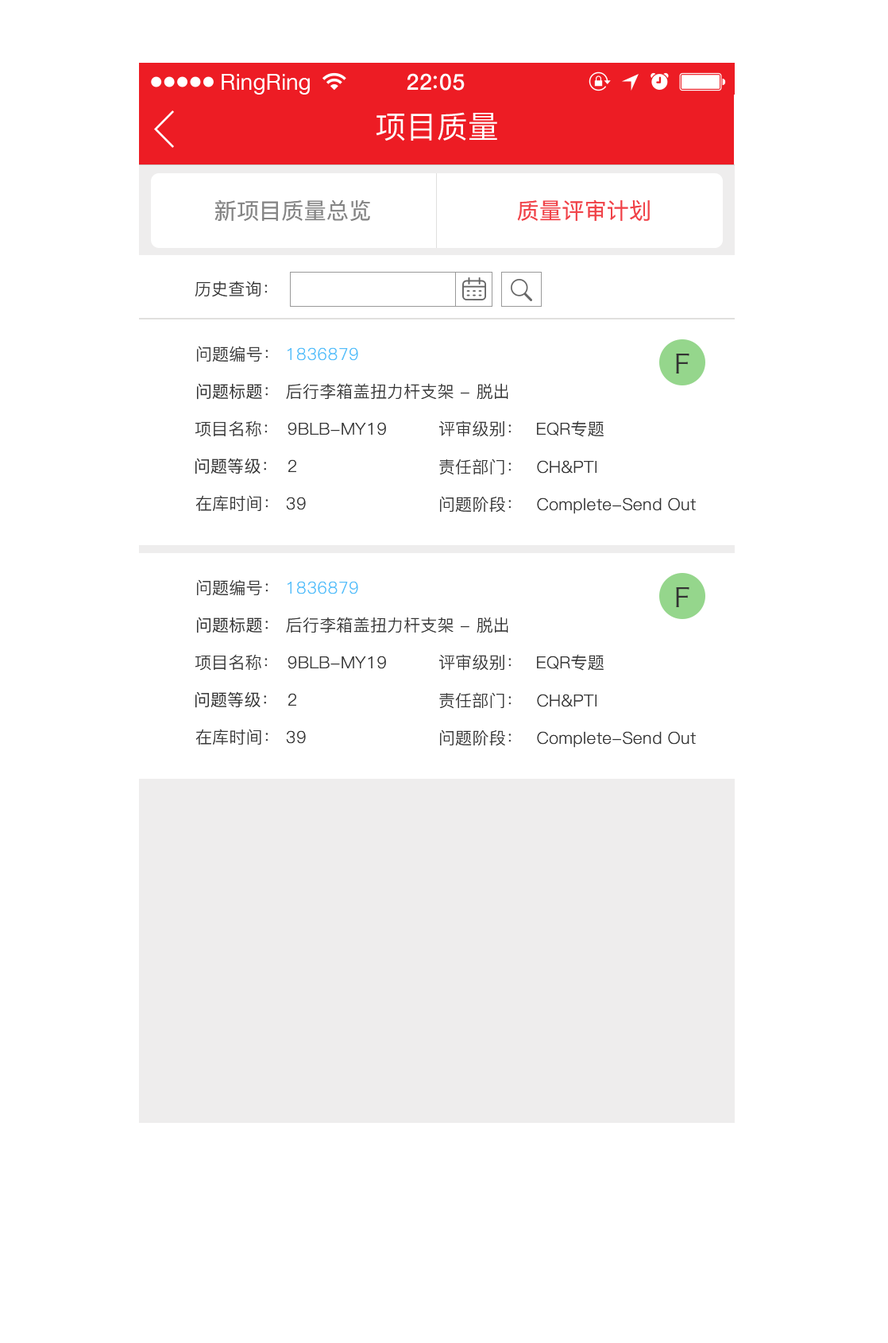
<style>
.page{position:relative;width:888px;height:1343px;background:#ffffff}
.page>*{position:absolute;margin:0}
.t1{font:22.3px "HelveticaNeue";color:#ffffff}
.t2{font:22.3px "HelveticaNeue-Medium";letter-spacing:0.03em;color:#ffffff}
.t3{font:30.7px "PingFangSC-Regular";letter-spacing:0.01em;color:#ffffff}
.t4{font:22.2px "PingFang-SC-Medium";letter-spacing:0.01em;color:#858585}
.t5{font:22.2px "PingFang-SC-Medium";letter-spacing:0.01em;color:#f04248}
.t6{font:16.7px "PingFang-SC-Regular";letter-spacing:0.01em;color:#333333}
.t7{font:16.7px "PingFang-SC-Regular";letter-spacing:0.01em;color:#53bdfa}
.t8{font:25.7px "HiraginoSansGB-W3";letter-spacing:0.01em;color:#333333}
.t9{font:16.7px "PingFangSC-Regular";letter-spacing:0.01em;color:#333333}
</style>
<div class="page">
<p class="t1" style="left:222px;top:74px;width:88px;height:21px">RingRing</p>
<p class="t2" style="left:407px;top:73px;width:58px;height:18px">22 05</p>
<p class="t3" style="left:376px;top:112px;width:121px;height:29px">项目质量</p>
<p class="t4" style="left:214px;top:199px;width:156px;height:22px">新项目质量总览</p>
<p class="t5" style="left:517px;top:199px;width:133px;height:22px">质量评审计划</p>
<p class="t6" style="left:195px;top:280px;width:72px;height:16px">历史查询：</p>
<p class="t6" style="left:197px;top:346px;width:71px;height:15px">问题编号：</p>
<p class="t7" style="left:288px;top:347px;width:70px;height:14px">1836879</p>
<p class="t8" style="left:676px;top:354px;width:14px;height:19px">F</p>
<p class="t9" style="left:197px;top:383px;width:71px;height:17px">问题标题：</p>
<p class="t6" style="left:286px;top:383px;width:222px;height:16px">后行李箱盖扭力杆支架 - 脱出</p>
<p class="t6" style="left:195px;top:420px;width:72px;height:17px">项目名称：</p>
<p class="t6" style="left:288px;top:422px;width:98px;height:13px">9BLB-MY19</p>
<p class="t6" style="left:439px;top:420px;width:72px;height:17px">评审级别：</p>
<p class="t6" style="left:537px;top:420px;width:67px;height:17px">EQR专题</p>
<p class="t9" style="left:195px;top:458px;width:71px;height:16px">问题等级：</p>
<p class="t6" style="left:288px;top:459px;width:8px;height:13px">2</p>
<p class="t6" style="left:439px;top:458px;width:72px;height:17px">责任部门：</p>
<p class="t6" style="left:537px;top:460px;width:60px;height:13px">CH&amp;PTI</p>
<p class="t6" style="left:195px;top:495px;width:73px;height:16px">在库时间：</p>
<p class="t6" style="left:286px;top:497px;width:20px;height:13px">39</p>
<p class="t6" style="left:440px;top:496px;width:71px;height:16px">问题阶段：</p>
<p class="t6" style="left:537px;top:497px;width:159px;height:17px">Complete-Send Out</p>
<p class="t6" style="left:197px;top:579px;width:71px;height:16px">问题编号：</p>
<p class="t7" style="left:288px;top:581px;width:70px;height:13px">1836879</p>
<p class="t8" style="left:676px;top:587px;width:14px;height:20px">F</p>
<p class="t9" style="left:197px;top:616px;width:71px;height:17px">问题标题：</p>
<p class="t6" style="left:286px;top:616px;width:222px;height:16px">后行李箱盖扭力杆支架 - 脱出</p>
<p class="t6" style="left:195px;top:654px;width:72px;height:16px">项目名称：</p>
<p class="t6" style="left:439px;top:654px;width:72px;height:16px">评审级别：</p>
<p class="t6" style="left:537px;top:654px;width:67px;height:16px">EQR专题</p>
<p class="t6" style="left:288px;top:655px;width:98px;height:14px">9BLB-MY19</p>
<p class="t9" style="left:195px;top:691px;width:71px;height:17px">问题等级：</p>
<p class="t6" style="left:288px;top:693px;width:8px;height:12px">2</p>
<p class="t6" style="left:439px;top:692px;width:72px;height:17px">责任部门：</p>
<p class="t6" style="left:537px;top:694px;width:60px;height:13px">CH&amp;PTI</p>
<p class="t6" style="left:195px;top:728px;width:73px;height:16px">在库时间：</p>
<p class="t6" style="left:286px;top:730px;width:20px;height:14px">39</p>
<p class="t6" style="left:440px;top:729px;width:71px;height:16px">问题阶段：</p>
<p class="t6" style="left:537px;top:731px;width:159px;height:17px">Complete-Send Out</p>
</div>
